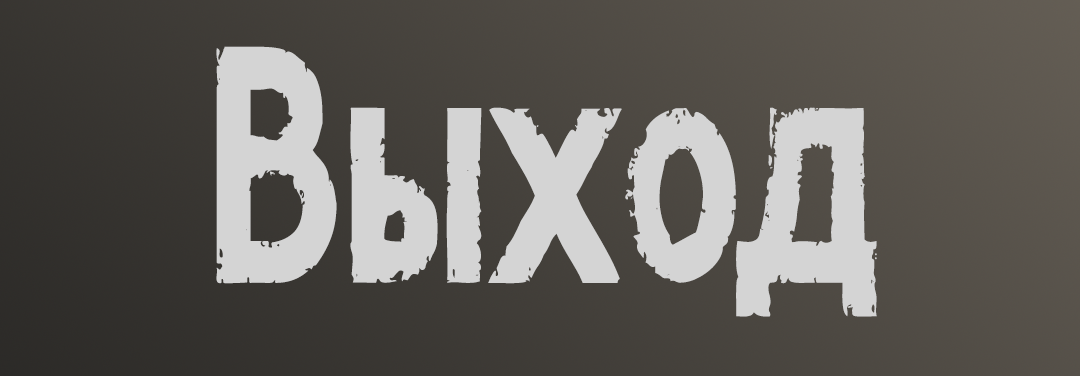
<style>
.page{position:relative;width:1080px;height:376px}
.page>*{position:absolute;margin:0}
.t1{font:329.4px "CatenaryStamp";letter-spacing:-0.035em;color:#d4d4d4;scale:0.81 1}
</style>
<div class="page">
<p class="t1" style="left:216px;top:46px;width:661px;height:271px">Выход</p>
</div>
